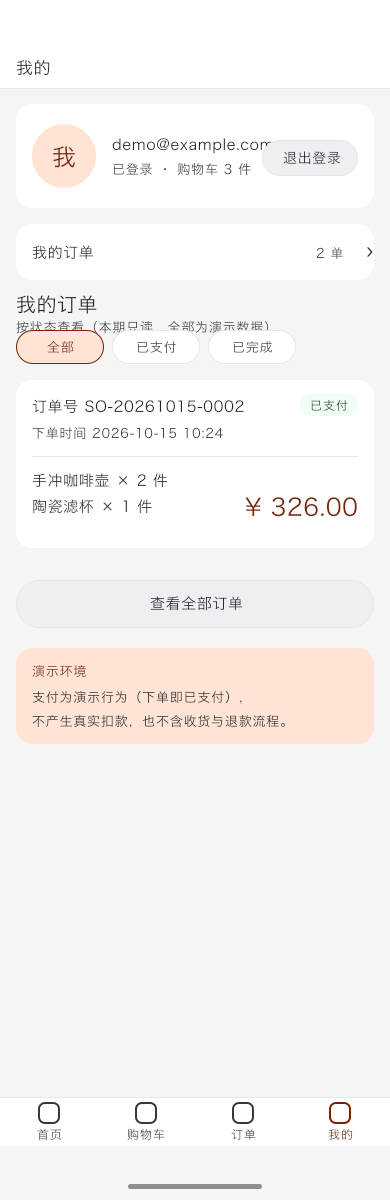
<style>
.page{position:relative;width:390px;height:1200px;background:#f5f5f5}
.page>*{position:absolute;margin:0}
.t1{font:17px "HiraginoSansGB-Regular";letter-spacing:0.03em;color:#23262c}
.t2{font:24px "HiraginoSansGB-Regular";letter-spacing:0.022em;color:#7a2200}
.t3{font:15px "HiraginoSansGB-Regular";letter-spacing:0.04em;color:#25282e}
.t4{font:14px "HiraginoSansGB-Regular";letter-spacing:0.045em;color:#272a30}
.t5{font:13px "HiraginoSansGB-Regular";letter-spacing:0.06em;color:#43484e}
.t6{font:15px "HiraginoSansGB-Regular";letter-spacing:0.04em;color:#2a2d33}
.t7{font:13px "HiraginoSansGB-Regular";letter-spacing:0.06em}
.t8{font:20px "HiraginoSansGB-Regular";letter-spacing:0.024em;color:#333940}
.t9{font:20px "HiraginoSansGB-Regular";letter-spacing:0.024em;color:#1f2329}
.t10{font:13px "HiraginoSansGB-Regular";letter-spacing:0.06em;color:#40454b}
.t11{font:13px "HiraginoSansGB-Regular";letter-spacing:0.06em;color:#45494f}
.t12{font:13px "HiraginoSansGB-Regular";letter-spacing:0.06em;color:#484c52}
.t13{font:15px "HiraginoSansGB-Regular";letter-spacing:0.04em;color:#1f2329}
.t14{font:12px "HiraginoSansGB-Regular";letter-spacing:0.08em;color:#083d19}
.t15{font:13px "HiraginoSansGB-Regular";letter-spacing:0.06em;color:#3b4147}
.t16{font:15px "HiraginoSansGB-Regular";letter-spacing:0.04em;color:#292c32}
.t17{font:15px "HiraginoSansGB-Regular";letter-spacing:0.04em;color:#23272c}
.t18{font:13px "HiraginoSansGB-Regular";letter-spacing:0.06em;color:#813012}
.t19{font:13px "HiraginoSansGB-Regular";letter-spacing:0.06em;color:#2f3034}
.t20{font:13px "HiraginoSansGB-Regular";letter-spacing:0.06em;color:#27292e}
.t21{font:12px "HiraginoSansGB-Regular";letter-spacing:0.08em}
.t22{font:12px "HiraginoSansGB-Regular";letter-spacing:0.08em;color:#43484e}
</style>
<div class="page">
<p class="t1" style="left:15px;top:59px;width:36px;height:17px">我的</p>
<p class="t2" style="left:52px;top:146px;width:24px;height:23px">我</p>
<p class="t3" style="left:111px;top:138px;width:163px;height:17px">demo@example.com</p>
<p class="t4" style="left:282px;top:151px;width:60px;height:15px">退出登录</p>
<p class="t5" style="left:112px;top:163px;width:140px;height:14px">已登录 · 购物车 3 件</p>
<p class="t6" style="left:31px;top:245px;width:63px;height:16px">我的订单</p>
<p class="t7" style="left:315px;top:247px;width:29px;height:13px">2 单</p>
<p class="t8" style="left:365px;top:247px;width:9px;height:11px">›</p>
<p class="t9" style="left:16px;top:295px;width:82px;height:20px">我的订单</p>
<p class="t10" style="left:15px;top:320px;width:255px;height:15px">按状态查看（本期只读，全部为演示数据）</p>
<p class="t7" style="left:46px;top:340px;width:29px;height:15px">全部</p>
<p class="t11" style="left:136px;top:341px;width:41px;height:13px">已支付</p>
<p class="t12" style="left:232px;top:341px;width:41px;height:13px">已完成</p>
<p class="t13" style="left:31px;top:399px;width:214px;height:16px">订单号 SO-20261015-0002</p>
<p class="t14" style="left:310px;top:399px;width:39px;height:13px">已支付</p>
<p class="t15" style="left:31px;top:427px;width:193px;height:13px">下单时间 2026-10-15 10:24</p>
<p class="t16" style="left:31px;top:473px;width:138px;height:16px">手冲咖啡壶 × 2 件</p>
<p class="t2" style="left:244px;top:497px;width:114px;height:21px">¥ 326.00</p>
<p class="t17" style="left:32px;top:499px;width:121px;height:16px">陶瓷滤杯 × 1 件</p>
<p class="t16" style="left:149px;top:596px;width:95px;height:16px">查看全部订单</p>
<p class="t18" style="left:31px;top:664px;width:56px;height:15px">演示环境</p>
<p class="t19" style="left:31px;top:691px;width:212px;height:14px">支付为演示行为（下单即已支付），</p>
<p class="t20" style="left:31px;top:714px;width:255px;height:15px">不产生真实扣款，也不含收货与退款流程。</p>
<p class="t21" style="left:36px;top:1128px;width:27px;height:13px">首页</p>
<p class="t22" style="left:126px;top:1128px;width:40px;height:13px">购物车</p>
<p class="t21" style="left:230px;top:1129px;width:27px;height:12px">订单</p>
<p class="t21" style="left:327px;top:1129px;width:27px;height:12px">我的</p>
</div>
